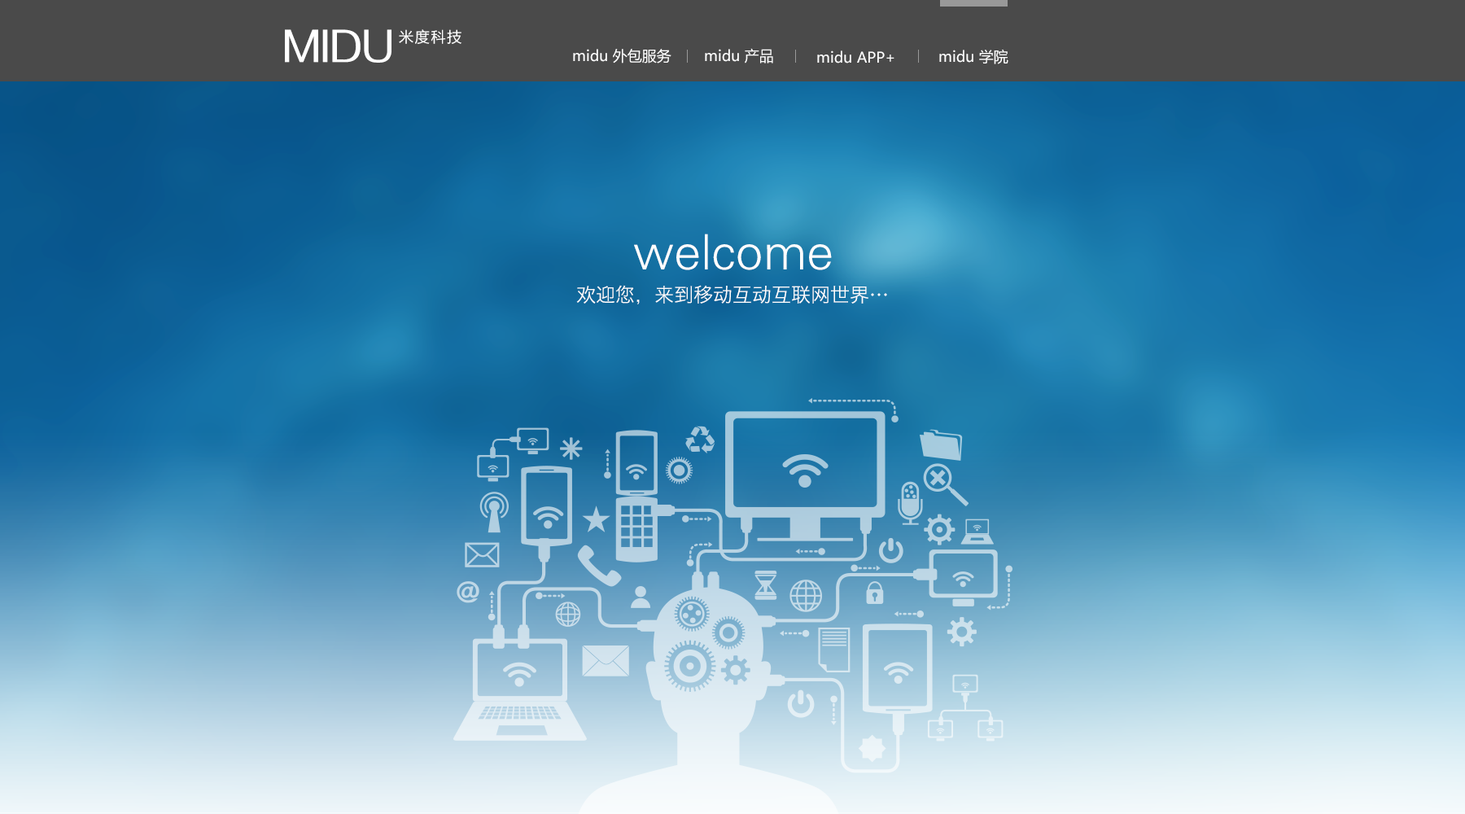
<style>
.page{position:relative;width:1465px;height:814px}
.page>*{position:absolute;margin:0}
.t1{font:39.1px "FZZZHUNHJW--GB1-0";color:#ffffff}
.t2{font:14.7px "MicrosoftYaHei";letter-spacing:0.1em;color:#ffffff}
.t3{font:14.7px "MicrosoftYaHei";color:#ffffff}
.t4{font:48.8px "FZY1JW--GB1-0";color:#ffffff}
.t5{font:19.5px "HiraginoSansGB-W3";color:#ffffff}
</style>
<div class="page">
<p class="t1" style="left:285px;top:29px;width:106px;height:34px">MIDU</p>
<p class="t2" style="left:399px;top:29px;width:62px;height:15px">米度科技</p>
<p class="t3" style="left:573px;top:49px;width:98px;height:14px">midu 外包服务</p>
<p class="t3" style="left:705px;top:48px;width:68px;height:15px">midu 产品</p>
<p class="t3" style="left:817px;top:50px;width:77px;height:13px">midu APP+</p>
<p class="t3" style="left:939px;top:49px;width:69px;height:15px">midu 学院</p>
<p class="t4" style="left:634px;top:234px;width:198px;height:36px">welcome</p>
<p class="t5" style="left:576px;top:285px;width:311px;height:19px">欢迎您，来到移动互动互联网世界…</p>
</div>
